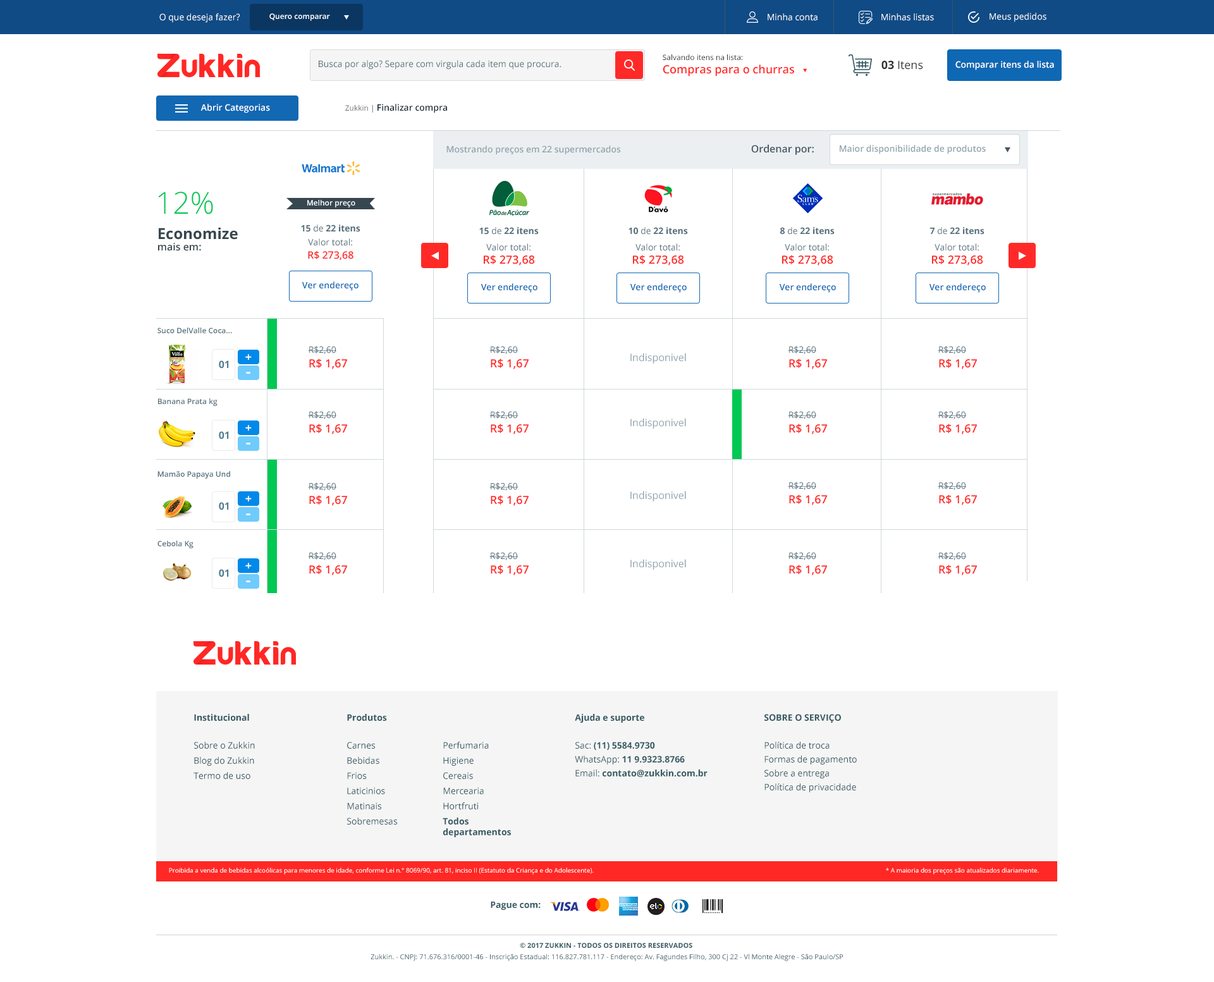
<style>
.page{position:relative;width:1214px;height:982px;background:#ffffff}
.page>*{position:absolute;margin:0}
.t1{font:8.9px "OpenSans";color:#ffffff}
.t2{font:7.6px "OpenSans-Semibold";color:#ffffff}
.t3{font:8.9px "OpenSans";color:#536f76}
.t4{font:7.6px/13.3px "OpenSans";color:#303030}
.t5{font:11.4px/13.3px "OpenSans-Semibold";color:#ff2a28}
.t6{font:11.4px "OpenSans";color:#303030}
.t7{font:11.4px "OpenSans-Bold";color:#303030}
.t8{font:8.9px "OpenSans-Semibold";color:#ffffff}
.t9{font:8.9px "OpenSans-Semibold";color:#1a2e35}
.t10{font:7.6px "OpenSans";color:#6e6e6e}
.t11{font:8.9px "OpenSans-Semibold";color:#90a4ae}
.t12{font:10.1px "OpenSans-Semibold";color:#455a64}
.t13{font:30.4px "OpenSans-Light";color:#00c853}
.t14{font:15.2px/11.4px "OpenSans-Bold";color:#37474f}
.t15{font:10.1px/11.4px "OpenSans-Semibold";color:#37474f}
.t16{font:8.9px/13.9px "OpenSans";color:#546e7a}
.t17{font:8.9px/13.3px "OpenSans-Bold";color:#546e7a}
.t18{font:8.9px/13.3px "OpenSans";color:#546e7a}
.t19{font:10.1px/13.3px "OpenSans-Semibold";color:#ff2a28}
.t20{font:8.9px/3.2px "OpenSans";color:#546e7a}
.t21{font:8.9px "OpenSans-Semibold";color:#1268b3}
.t22{font:7.6px "OpenSans-Semibold";color:#546e7a}
.t23{font:11.4px/14.5px "OpenSans-Semibold";color:#ff2a28}
.t24{font:8.9px/22.1px "OpenSans";color:#546e7a}
.t25{font:10.1px "OpenSans";color:#90a4ae}
.t26{font:10.1px "OpenSans-Bold";color:#507e8d}
.t27{font:11.4px "OpenSans-Bold";color:#ffffff}
.t28{font:15.2px "OpenSans-Bold";color:#ffffff}
.t29{font:8.9px/15.2px "OpenSans";color:#375a64}
.t30{font:8.9px/12.6px "OpenSans-Bold";color:#375a64}
.t31{font:8.9px/13.9px "OpenSans-Bold";color:#375a64}
.t32{font:8.9px/13.9px "OpenSans";color:#375a64}
.t33{font:8.9px/15.2px "OpenSans-Bold";color:#375a64}
.t34{font:8.9px/10.8px "OpenSans-Bold";color:#375a64}
.t35{font:6.3px "OpenSans";color:#ffffff}
.t36{font:8.9px "OpenSans-Bold";color:#375a64}
.t37{font:7px/11.4px "OpenSans";color:#375a64}
.t38{font:7px/11.4px "OpenSans-Bold";color:#375a64}
</style>
<div class="page">
<p class="t1" style="left:159px;top:13px;width:81px;height:10px">O que deseja fazer?</p>
<p class="t2" style="left:269px;top:13px;width:61px;height:8px">Quero comparar</p>
<p class="t1" style="left:768px;top:13px;width:50px;height:8px">Minha conta</p>
<p class="t1" style="left:882px;top:13px;width:52px;height:8px">Minhas listas</p>
<p class="t1" style="left:990px;top:13px;width:57px;height:9px">Meus pedidos</p>
<p class="t3" style="left:319px;top:60px;width:243px;height:10px">Busca por algo? Separe com virgula cada item que procura.</p>
<p class="t4" style="left:663px;top:54px;width:131px;height:23px">Salvando itens na lista:<br><span class="t5">Compras para o churras</span></p>
<p class="t6" style="left:882px;top:61px;width:41px;height:9px"><span class="t7">03</span> Itens</p>
<p class="t8" style="left:956px;top:61px;width:98px;height:9px">Comparar itens da lista</p>
<p class="t8" style="left:200px;top:104px;width:70px;height:9px">Abrir Categorias</p>
<p class="t9" style="left:345px;top:104px;width:102px;height:9px"><span class="t10">Zukkin | </span>Finalizar compra</p>
<p class="t11" style="left:446px;top:145px;width:175px;height:10px">Mostrando preços em 22 supermercados</p>
<p class="t12" style="left:751px;top:144px;width:63px;height:11px">Ordenar por:</p>
<p class="t11" style="left:840px;top:145px;width:146px;height:9px">Maior disponibilidade de produtos</p>
<p class="t13" style="left:158px;top:192px;width:55px;height:22px">12%</p>
<p class="t2" style="left:307px;top:200px;width:48px;height:7px">Melhor preço</p>
<p class="t14" style="left:158px;top:227px;width:80px;height:24px">Economize<br><span class="t15">mais em:</span></p>
<p class="t16" style="left:301px;top:224px;width:59px;height:37px;text-align:center"><span class="t17">15 </span><span class="t18">de </span><span class="t17">22 itens<br></span>Valor total:<br><span class="t19">R$ 273,68</span></p>
<p class="t20" style="left:479px;top:227px;width:60px;height:39px;text-align:center"><span class="t17">15 </span><span class="t18">de </span><span class="t17">22 itens<br><br></span>Valor total:<br><span class="t5">R$ 273,68</span></p>
<p class="t20" style="left:629px;top:227px;width:59px;height:39px;text-align:center"><span class="t17">10 </span><span class="t18">de </span><span class="t17">22 itens<br><br></span>Valor total:<br><span class="t5">R$ 273,68</span></p>
<p class="t20" style="left:780px;top:227px;width:55px;height:39px;text-align:center"><span class="t17">8 </span><span class="t18">de </span><span class="t17">22 itens<br><br></span>Valor total:<br><span class="t5">R$ 273,68</span></p>
<p class="t20" style="left:930px;top:227px;width:55px;height:39px;text-align:center"><span class="t17">7 </span><span class="t18">de </span><span class="t17">22 itens<br><br></span>Valor total:<br><span class="t5">R$ 273,68</span></p>
<p class="t21" style="left:302px;top:281px;width:57px;height:10px">Ver endereço</p>
<p class="t21" style="left:481px;top:283px;width:57px;height:10px">Ver endereço</p>
<p class="t21" style="left:630px;top:283px;width:57px;height:10px">Ver endereço</p>
<p class="t21" style="left:779px;top:283px;width:57px;height:10px">Ver endereço</p>
<p class="t21" style="left:929px;top:283px;width:57px;height:10px">Ver endereço</p>
<p class="t22" style="left:157px;top:328px;width:75px;height:5px">Suco DelValle Coca...</p>
<p class="t23" style="left:308px;top:346px;width:39px;height:23px"><span class="t24">R$2,60<br></span>R$ 1,67</p>
<p class="t23" style="left:489px;top:346px;width:40px;height:23px"><span class="t24">R$2,60<br></span>R$ 1,67</p>
<p class="t25" style="left:630px;top:353px;width:56px;height:11px">Indisponivel</p>
<p class="t23" style="left:788px;top:346px;width:39px;height:23px"><span class="t24">R$2,60<br></span>R$ 1,67</p>
<p class="t23" style="left:938px;top:346px;width:39px;height:23px"><span class="t24">R$2,60<br></span>R$ 1,67</p>
<p class="t26" style="left:219px;top:360px;width:10px;height:9px">01</p>
<p class="t27" style="left:245px;top:354px;width:7px;height:6px">+</p>
<p class="t28" style="left:246px;top:372px;width:4px;height:2px">-</p>
<p class="t22" style="left:158px;top:398px;width:60px;height:8px">Banana Prata kg</p>
<p class="t23" style="left:308px;top:411px;width:39px;height:23px"><span class="t24">R$2,60<br></span>R$ 1,67</p>
<p class="t23" style="left:489px;top:411px;width:40px;height:23px"><span class="t24">R$2,60<br></span>R$ 1,67</p>
<p class="t23" style="left:788px;top:411px;width:39px;height:23px"><span class="t24">R$2,60<br></span>R$ 1,67</p>
<p class="t23" style="left:938px;top:411px;width:39px;height:23px"><span class="t24">R$2,60<br></span>R$ 1,67</p>
<p class="t27" style="left:245px;top:425px;width:7px;height:6px">+</p>
<p class="t25" style="left:630px;top:418px;width:56px;height:11px">Indisponivel</p>
<p class="t26" style="left:219px;top:431px;width:10px;height:9px">01</p>
<p class="t28" style="left:246px;top:443px;width:4px;height:2px">-</p>
<p class="t22" style="left:157px;top:471px;width:73px;height:8px">Mamão Papaya Und</p>
<p class="t23" style="left:308px;top:483px;width:39px;height:23px"><span class="t24">R$2,60<br></span>R$ 1,67</p>
<p class="t23" style="left:489px;top:483px;width:40px;height:23px"><span class="t24">R$2,60<br></span>R$ 1,67</p>
<p class="t23" style="left:788px;top:482px;width:39px;height:23px"><span class="t24">R$2,60<br></span>R$ 1,67</p>
<p class="t23" style="left:938px;top:482px;width:39px;height:23px"><span class="t24">R$2,60<br></span>R$ 1,67</p>
<p class="t27" style="left:245px;top:496px;width:7px;height:5px">+</p>
<p class="t25" style="left:630px;top:491px;width:56px;height:10px">Indisponivel</p>
<p class="t26" style="left:219px;top:502px;width:10px;height:8px">01</p>
<p class="t28" style="left:246px;top:513px;width:4px;height:2px">-</p>
<p class="t22" style="left:157px;top:541px;width:37px;height:7px">Cebola Kg</p>
<p class="t23" style="left:308px;top:552px;width:39px;height:23px"><span class="t24">R$2,60<br></span>R$ 1,67</p>
<p class="t23" style="left:489px;top:552px;width:40px;height:23px"><span class="t24">R$2,60<br></span>R$ 1,67</p>
<p class="t23" style="left:788px;top:552px;width:39px;height:23px"><span class="t24">R$2,60<br></span>R$ 1,67</p>
<p class="t23" style="left:938px;top:552px;width:39px;height:23px"><span class="t24">R$2,60<br></span>R$ 1,67</p>
<p class="t26" style="left:219px;top:569px;width:10px;height:8px">01</p>
<p class="t27" style="left:245px;top:563px;width:7px;height:6px">+</p>
<p class="t25" style="left:630px;top:559px;width:56px;height:11px">Indisponivel</p>
<p class="t28" style="left:246px;top:581px;width:4px;height:1px">-</p>
<p class="t29" style="left:194px;top:714px;width:61px;height:65px"><span class="t30">Institucional<br><br></span>Sobre o Zukkin<br>Blog do Zukkin<br>Termo de uso</p>
<p class="t29" style="left:347px;top:714px;width:50px;height:111px"><span class="t30">Produtos<br><br></span>Carnes<br>Bebidas<br>Frios<br>Laticinios<br>Matinais<br>Sobremesas</p>
<p class="t31" style="left:575px;top:714px;width:133px;height:63px">Ajuda e suporte<br><br><span class="t32">Sac: </span>(11) 5584.9730<br><span class="t32">WhatsApp: </span>11 9.9323.8766<br><span class="t32">Email: </span>contato@zukkin.com.br</p>
<p class="t32" style="left:765px;top:714px;width:92px;height:78px"><span class="t31">SOBRE O SERVIÇO<br><br></span>Política de troca<br>Formas de pagamento<br>Sobre a entrega<br>Política de privacidade</p>
<p class="t29" style="left:443px;top:742px;width:68px;height:95px">Perfumaria<br>Higiene<br>Cereais<br>Mercearia<br>Hortfruti<br><span class="t33">Todos<br></span><span class="t34">departamentos</span></p>
<p class="t35" style="left:169px;top:868px;width:425px;height:7px">Proibida a venda de bebidas alcoólicas para menores de idade, conforme Lei n.° 8069/90, art. 81, inciso II (Estatuto da Criança e do Adolescente).</p>
<p class="t35" style="left:886px;top:868px;width:153px;height:7px">* A maioria dos preços são atualizados diariamente.</p>
<p class="t36" style="left:491px;top:901px;width:50px;height:9px">Pague com:</p>
<p class="t37" style="left:371px;top:943px;width:473px;height:18px;text-align:center"><span class="t38">© 2017 ZUKKIN - TODOS OS DIREITOS RESERVADOS <br></span>Zukkin. - CNPJ: 71.676.316/0001-46 - Inscrição Estadual: 116.827.781.117 - Endereço: Av. Fagundes Filho, 300 Cj 22 - Vl Monte Alegre - São Paulo/SP</p>
</div>
